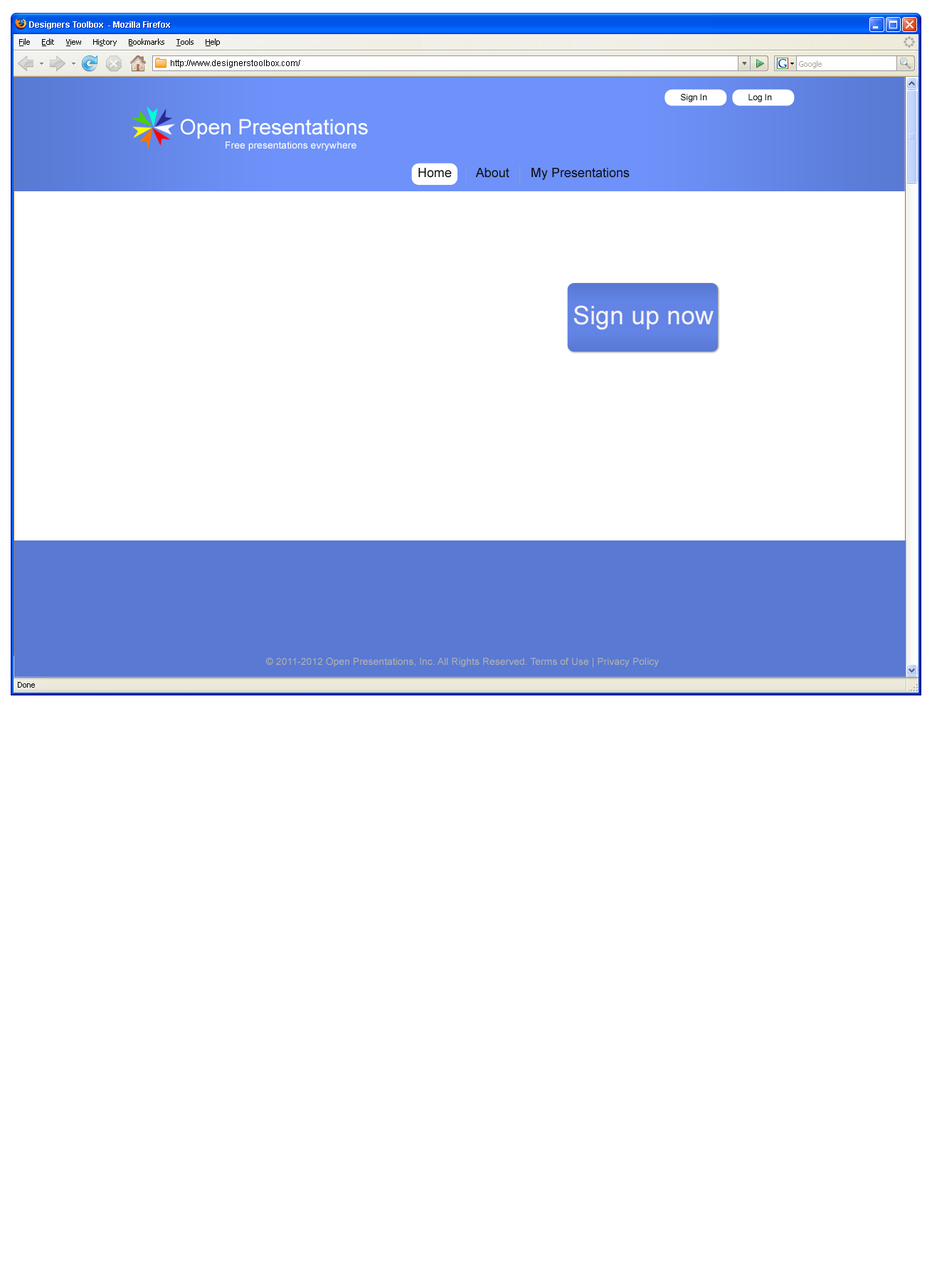
<style>
.page{position:relative;width:932px;height:1280px;background:#ffffff}
.page>*{position:absolute;margin:0}
.t1{font:8.5px "Arial-BoldMT";color:#ffffff}
.t2{font:8.5px "ArialMT";color:#000000}
.t3{font:8.5px "ArialMT";color:#010101}
.t4{font:21.3px "ArialMT";color:#fdfdfd}
.t5{font:10px "ArialMT";color:#fdfdfd}
.t6{font:12.8px "ArialMT";color:#0e0e0e}
.t7{font:25.6px "ArialMT";color:#f5f3f3}
.t8{font:10px "ArialMT";color:#b1b0b0}
</style>
<div class="page">
<p class="t1" style="left:29px;top:21px;width:141px;height:8px">Designers Toolbox  - Mozilla Firefox</p>
<p class="t2" style="left:171px;top:60px;width:129px;height:8px">http://www.designerstoolbox.com/</p>
<p class="t3" style="left:681px;top:94px;width:26px;height:8px">Sign In</p>
<p class="t3" style="left:748px;top:94px;width:24px;height:8px">Log In</p>
<p class="t4" style="left:181px;top:119px;width:187px;height:20px">Open Presentations</p>
<p class="t5" style="left:225px;top:142px;width:131px;height:9px">Free presentations evrywhere</p>
<p class="t6" style="left:418px;top:168px;width:34px;height:10px">Home</p>
<p class="t6" style="left:475px;top:168px;width:34px;height:10px">About</p>
<p class="t6" style="left:531px;top:168px;width:98px;height:12px">My Presentations</p>
<p class="t7" style="left:573px;top:305px;width:140px;height:25px">Sign up now</p>
<p class="t8" style="left:265px;top:657px;width:394px;height:11px">© 2011-2012 Open Presentations, Inc. All Rights Reserved. Terms of Use | Privacy Policy</p>
</div>
